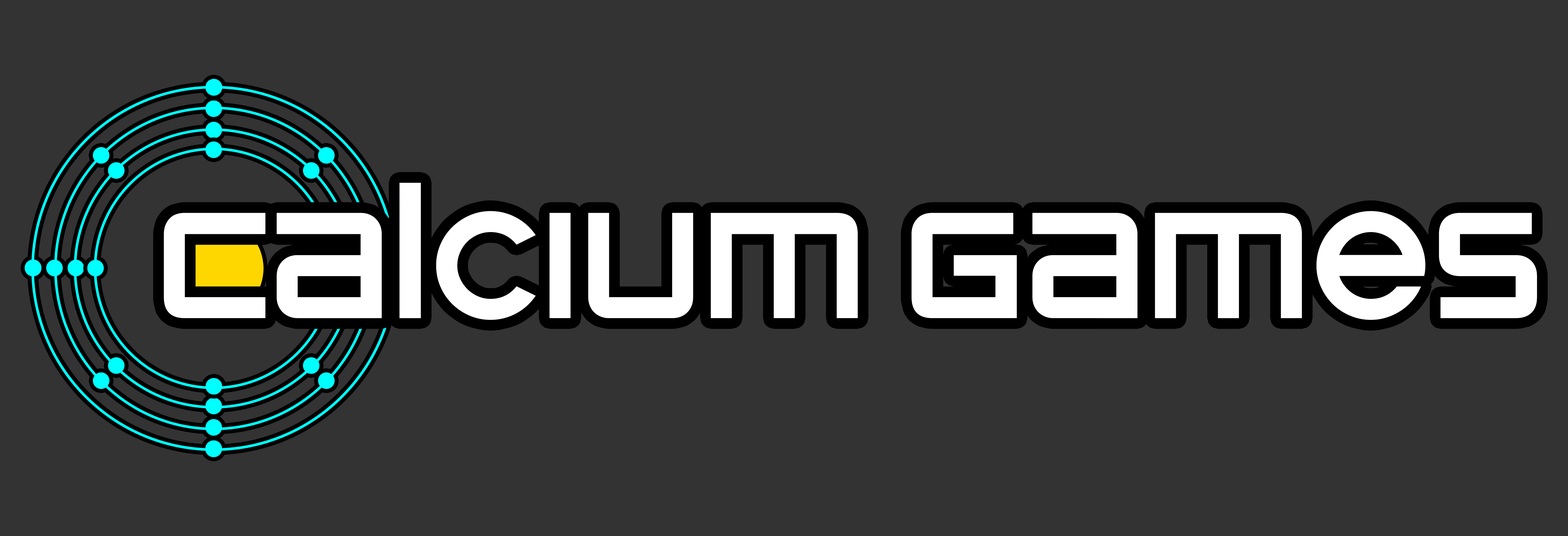
<style>
.page{position:relative;width:1568px;height:536px;background:#333333}
.page>*{position:absolute;margin:0}
.t1{font:167.5px "ZeroesOne-Regular";color:#ffffff}
.t2{font:184.2px "SteelworksVintageDemo";color:#ffffff}
</style>
<div class="page">
<p class="t1" style="left:164px;top:183px;width:694px;height:137px">Calcium</p>
<p class="t1" style="left:911px;top:211px;width:626px;height:109px"><span class="t2"><br></span>Games</p>
</div>
